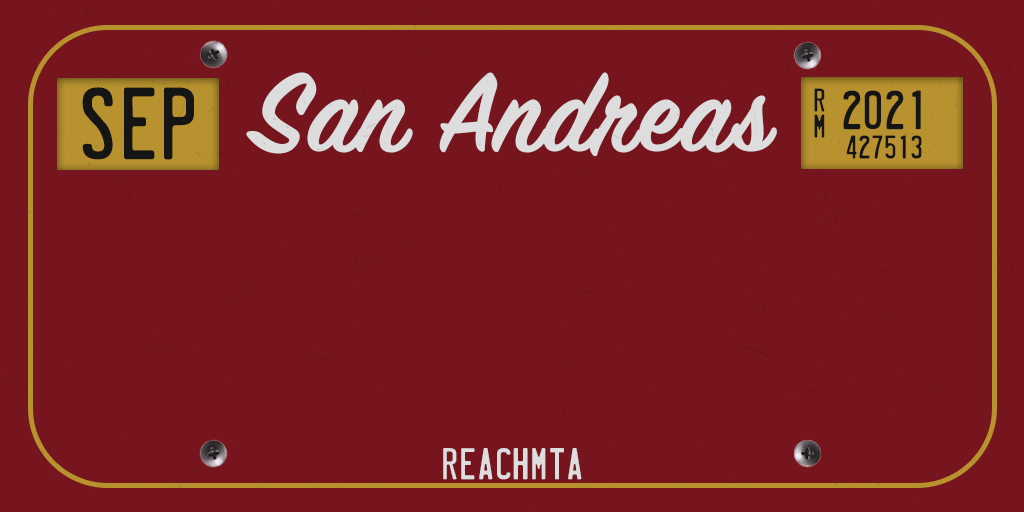
<style>
.page{position:relative;width:1024px;height:512px;background:#77151e}
.page>*{position:absolute;margin:0}
.t1{font:120px "SignPainterHouseScript";color:#dddddd;font-weight:bold}
.t2{font:92.2px "LicensePlate";color:#151515}
.t3{font:29.6px "LicensePlate";color:#151515}
.t4{font:49.4px "LicensePlate";color:#151515}
.t5{font:40px "LicensePlate";letter-spacing:0.005em;color:#dcdcdc}
</style>
<div class="page">
<p class="t1" style="left:246px;top:72px;width:531px;height:85px">San Andreas</p>
<p class="t2" style="left:82px;top:87px;width:112px;height:73px">SEP</p>
<p class="t3" style="left:814px;top:88px;width:11px;height:24px">R</p>
<p class="t4" style="left:843px;top:90px;width:78px;height:40px">2021</p>
<p class="t3" style="left:814px;top:114px;width:11px;height:24px">m</p>
<p class="t3" style="left:846px;top:135px;width:76px;height:24px">427513</p>
<p class="t5" style="left:443px;top:448px;width:139px;height:32px">REACHMTA</p>
</div>
